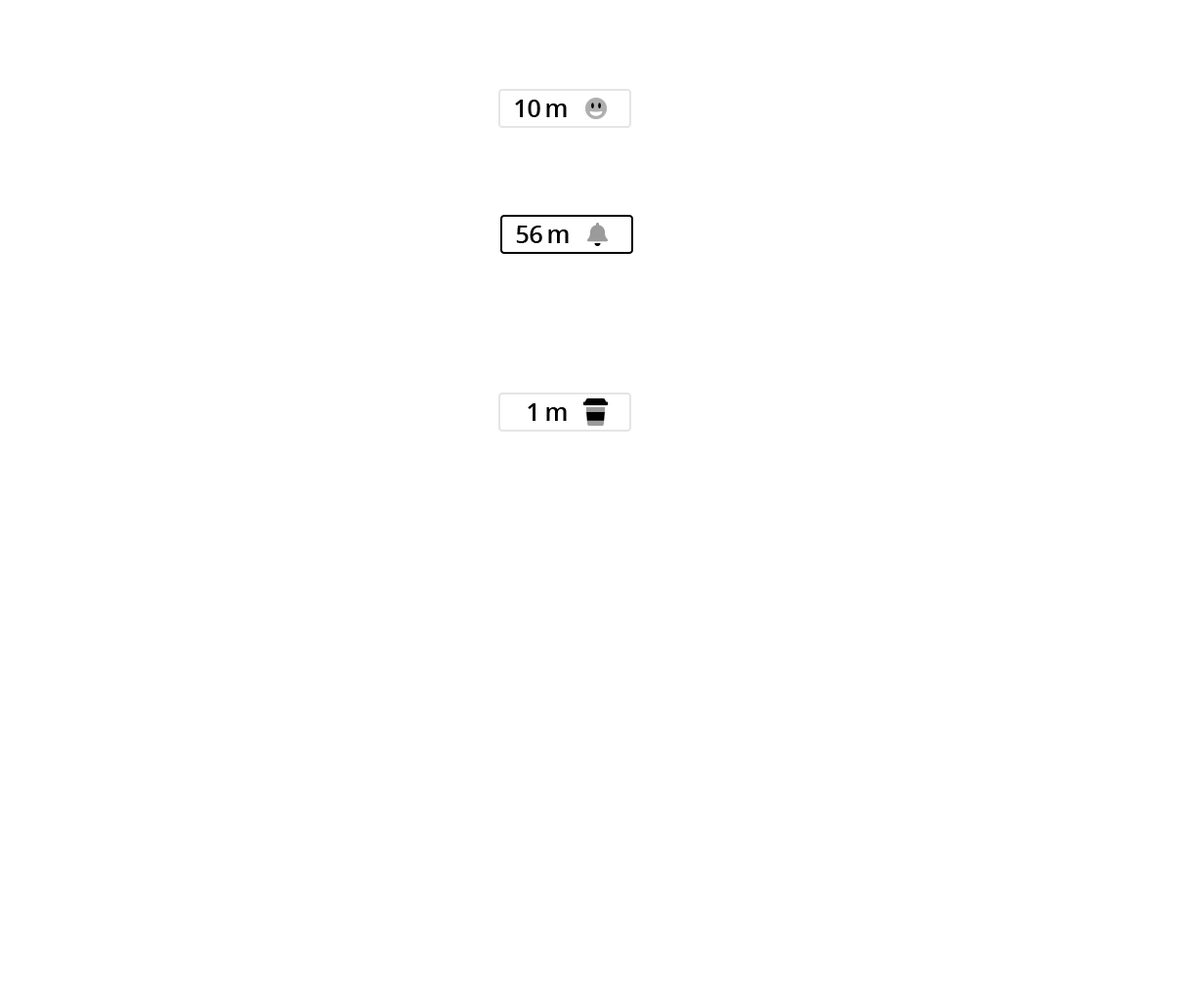
<style>
.page{position:relative;width:1197px;height:996px;background:#ffffff}
.page>*{position:absolute;margin:0}
.t1{font:24.4px "OpenSans-Semibold";color:#000000}
.t2{font:24.4px "OpenSans-Semibold";letter-spacing:0.062em;color:#000000}
</style>
<div class="page">
<p class="t1" style="left:515px;top:100px;width:25px;height:17px">10</p>
<p class="t2" style="left:546px;top:104px;width:21px;height:13px">m</p>
<p class="t1" style="left:516px;top:226px;width:26px;height:17px">56</p>
<p class="t2" style="left:548px;top:230px;width:21px;height:13px">m</p>
<p class="t1" style="left:528px;top:403px;width:7px;height:18px">1</p>
<p class="t2" style="left:546px;top:407px;width:21px;height:14px">m</p>
</div>
